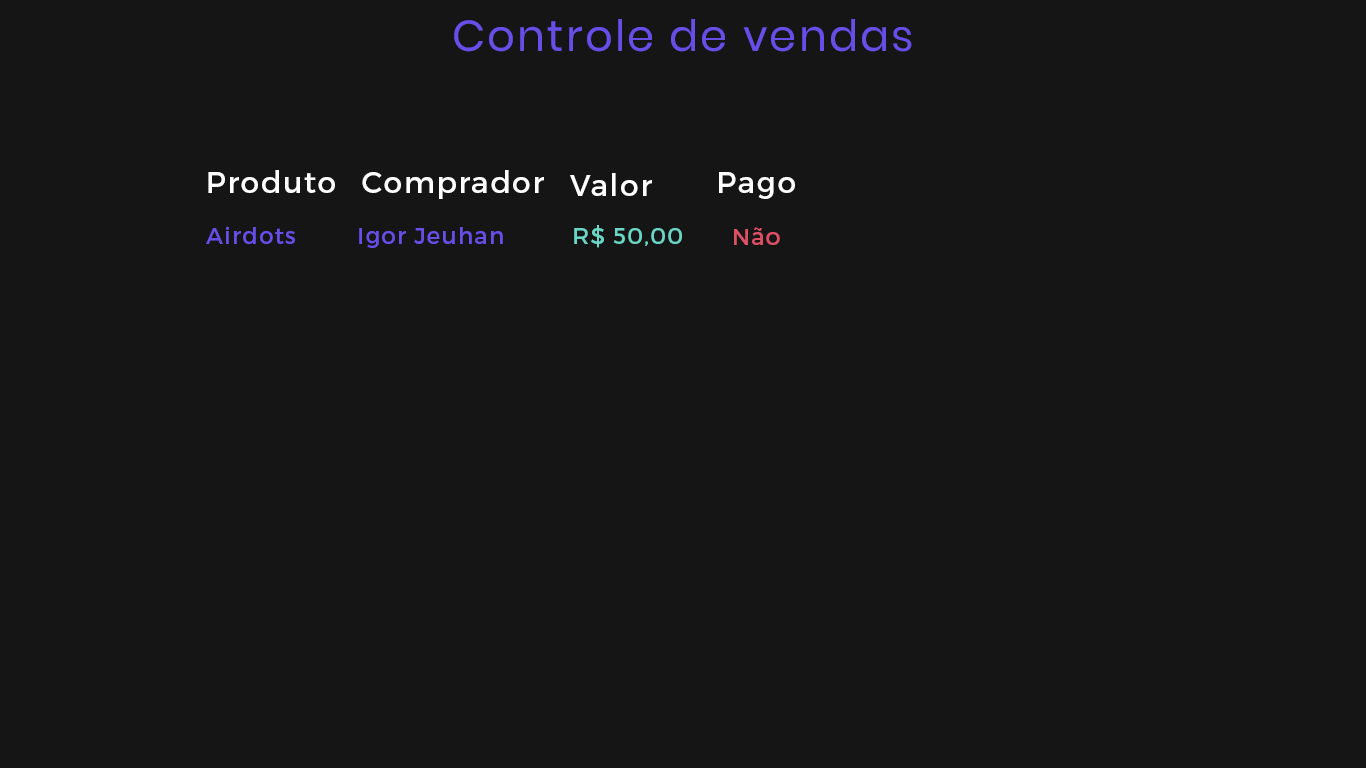
<style>
.page{position:relative;width:1366px;height:768px;background:#151515}
.page>*{position:absolute;margin:0}
.t1{font:43.3px "Poppins-Regular";letter-spacing:0.05em;color:#674ee7}
.t2{font:30px "Montserrat-Regular";letter-spacing:0.05em;color:#ffffff}
.t3{font:23px "Montserrat-Regular";letter-spacing:0.05em;color:#674ee7}
.t4{font:23px "Montserrat-Regular";letter-spacing:0.05em;color:#6ad6c6}
.t5{font:23px "Montserrat-Regular";letter-spacing:0.05em;color:#db5065}
</style>
<div class="page">
<p class="t1" style="left:454px;top:19px;width:458px;height:33px">Controle de vendas</p>
<p class="t2" style="left:208px;top:170px;width:127px;height:23px">Produto</p>
<p class="t2" style="left:362px;top:170px;width:182px;height:29px">Comprador</p>
<p class="t2" style="left:570px;top:173px;width:82px;height:23px">Valor</p>
<p class="t2" style="left:719px;top:172px;width:76px;height:27px">Pago</p>
<p class="t3" style="left:206px;top:226px;width:89px;height:18px">Airdots</p>
<p class="t3" style="left:359px;top:227px;width:144px;height:21px">Igor Jeuhan</p>
<p class="t4" style="left:574px;top:225px;width:108px;height:23px">R$ 50,00</p>
<p class="t5" style="left:734px;top:227px;width:46px;height:18px">Não</p>
</div>
